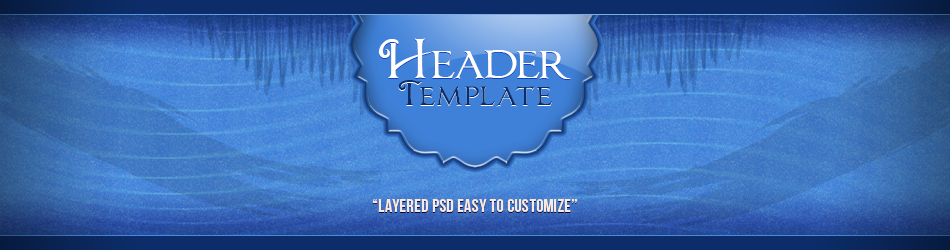
<style>
.page{position:relative;width:950px;height:250px}
.page>*{position:absolute;margin:0}
.t1{font:47.2px "ChocolateBox";color:#ffffff}
.t2{font:31.5px "ChocolateBox";letter-spacing:0.06em;color:#0c2d69}
.t3{font:18px "BebasNeue";letter-spacing:0.02em;color:#f7ffe0}
</style>
<div class="page">
<p class="t1" style="left:378px;top:38px;width:193px;height:41px">Header</p>
<p class="t2" style="left:398px;top:80px;width:155px;height:26px">Template</p>
<p class="t3" style="left:372px;top:199px;width:205px;height:13px">“Layered PSD easy to customize”</p>
</div>
